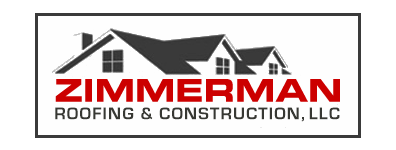
<style>
.page{position:relative;width:396px;height:150px;background:#fefefe}
.page>*{position:absolute;margin:0}
.t1{font:31.4px "Eurostile-BoldExtendedTwo";color:#cc0000;scale:0.96 1}
.t2{font:17.8px "EurostileBold";letter-spacing:0.06em;color:#373833}
</style>
<div class="page">
<p class="t1" style="left:55px;top:79px;width:285px;height:23px">ZIMMERMAN</p>
<p class="t2" style="left:55px;top:107px;width:285px;height:15px">ROOFING &amp; CONSTRUCTION, LLC</p>
</div>
